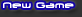
<style>
.page{position:relative;width:82px;height:17px}
.page>*{position:absolute;margin:0}
.t1{font:10px "ThundergodII";color:#ffffff}
</style>
<div class="page">
<p class="t1" style="left:3px;top:2px;width:71px;height:6px">New Game</p>
</div>
